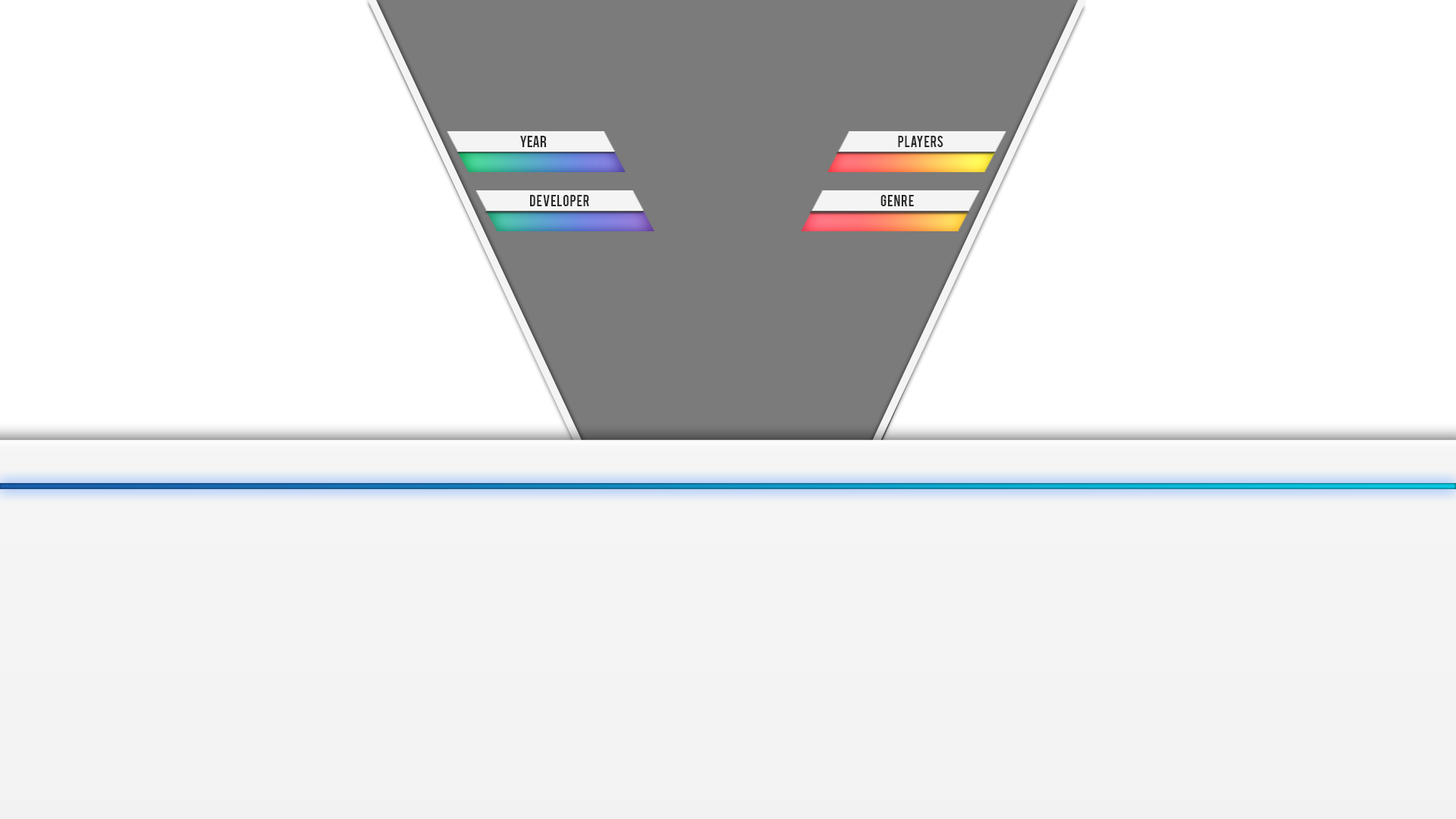
<style>
.page{position:relative;width:1456px;height:819px;background:#ffffff}
.page>*{position:absolute;margin:0}
.t1{font:16.1px "BebasNeue";letter-spacing:0.025em;color:#282828}
.t2{font:12.5px "Bebas";letter-spacing:0.025em;color:#282828}
</style>
<div class="page">
<p class="t1" style="left:520px;top:136px;width:27px;height:11px">year</p>
<p class="t2" style="left:898px;top:136px;width:45px;height:11px">PLAYERS</p>
<p class="t2" style="left:530px;top:195px;width:59px;height:11px">developer</p>
<p class="t2" style="left:880px;top:195px;width:34px;height:11px">genre</p>
</div>
